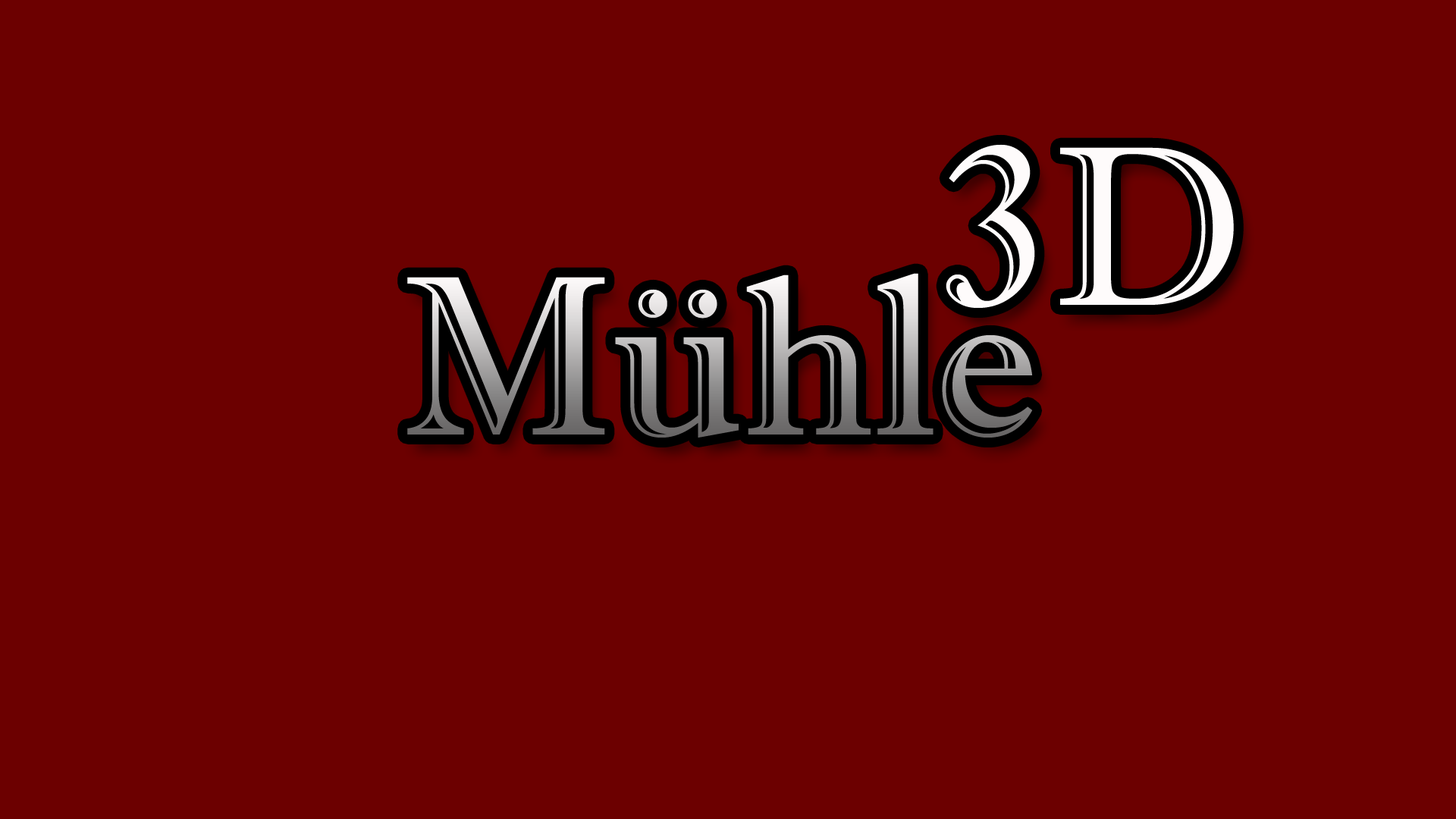
<style>
.page{position:relative;width:1456px;height:819px;background:#6c0000}
.page>*{position:absolute;margin:0}
.t1{font:227.5px "ImprintMT-Shadow";color:#fefbfb}
.t2{font:227.5px "ImprintMT-Shadow"}
</style>
<div class="page">
<p class="t1" style="left:946px;top:144px;width:288px;height:164px">3D</p>
<p class="t2" style="left:407px;top:273px;width:626px;height:165px">Mühle</p>
</div>
